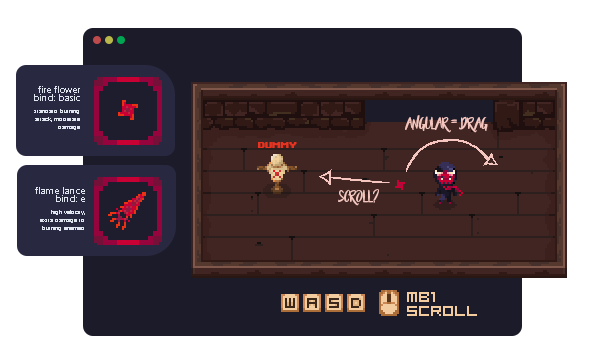
<style>
.page{position:relative;width:600px;height:360px;background:#ffffff}
.page>*{position:absolute;margin:0}
.t1{font:10px/8px "Ebrima";color:#e0e6ef}
.t2{font:6px/8px "Ebrima";color:#e0e6ef}
.t3{font:12px "BeautyandtheBeast";color:#f5c6bf}
.t4{font:12px "UpheavalTT-BRK-";color:#e83320}
</style>
<div class="page">
<p class="t1" style="left:34px;top:86px;width:46px;height:15px;text-align:right">fire flower<br>bind: basic</p>
<p class="t2" style="left:34px;top:109px;width:46px;height:21px;text-align:right">standard burning<br>attack, moderate<br>damage</p>
<p class="t3" style="left:405px;top:115px;width:83px;height:18px">ANGULAR = DRAG</p>
<p class="t4" style="left:258px;top:142px;width:39px;height:6px">DUMMY</p>
<p class="t1" style="left:35px;top:187px;width:50px;height:15px;text-align:right">flame lance<br>bind: e</p>
<p class="t3" style="left:338px;top:189px;width:41px;height:17px">scroll?</p>
<p class="t2" style="left:40px;top:210px;width:45px;height:21px;text-align:right">high velocity,<br>extra damage to<br>burning enemies</p>
</div>
